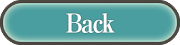
<style>
.page{position:relative;width:180px;height:45px;background:#4a9e9f}
.page>*{position:absolute;margin:0}
.t1{font:26px "RyuminPro-ExBold";letter-spacing:-0.08em;color:#ffffff;scale:0.9 1}
</style>
<div class="page">
<p class="t1" style="left:66px;top:13px;width:49px;height:20px">Back</p>
</div>
